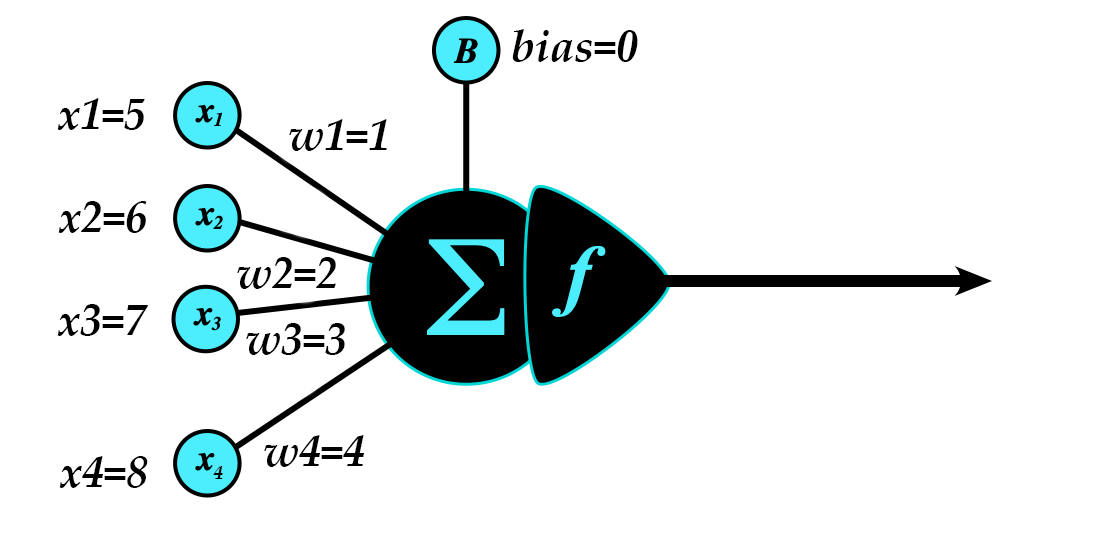
<style>
.page{position:relative;width:1102px;height:534px;background:#ffffff}
.page>*{position:absolute;margin:0}
.t1{font:44px "PalatinoLinotype-BoldItalic";color:#000000}
.t2{font:18.7px "PalatinoLinotype-BoldItalic";color:#000000}
</style>
<div class="page">
<p class="t1" style="left:512px;top:29px;width:126px;height:33px">bias=0</p>
<p class="t1" style="left:57px;top:98px;width:88px;height:32px">x1=5</p>
<p class="t1" style="left:289px;top:119px;width:98px;height:32px">w1=1</p>
<p class="t1" style="left:58px;top:201px;width:89px;height:32px">x2=6</p>
<p class="t1" style="left:237px;top:257px;width:99px;height:32px">w2=2</p>
<p class="t1" style="left:57px;top:304px;width:91px;height:32px">x3=7</p>
<p class="t1" style="left:246px;top:323px;width:99px;height:32px">w3=3</p>
<p class="t1" style="left:264px;top:435px;width:100px;height:32px">w4=4</p>
<p class="t1" style="left:59px;top:456px;width:89px;height:32px">x4=8</p>
<p class="t2" style="left:213px;top:466px;width:10px;height:13px">4</p>
</div>
